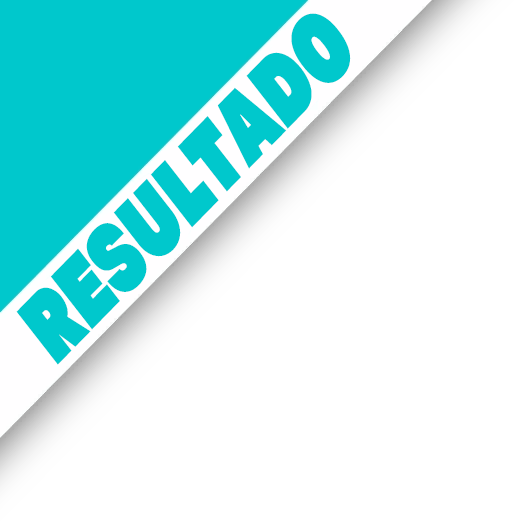
<style>
.page{position:relative;width:514px;height:522px;background:#ffffff}
.page>*{position:absolute;margin:0}
.t1{font:79.7px "RaglanPunchStd-UB";letter-spacing:-0.003em;color:#00c8cc;font-style:italic;scale:0.75 1}
</style>
<div class="page">
<p class="t1" style="left:16px;top:13px;width:335px;height:352px;rotate:-46deg">RESULTADO</p>
</div>
